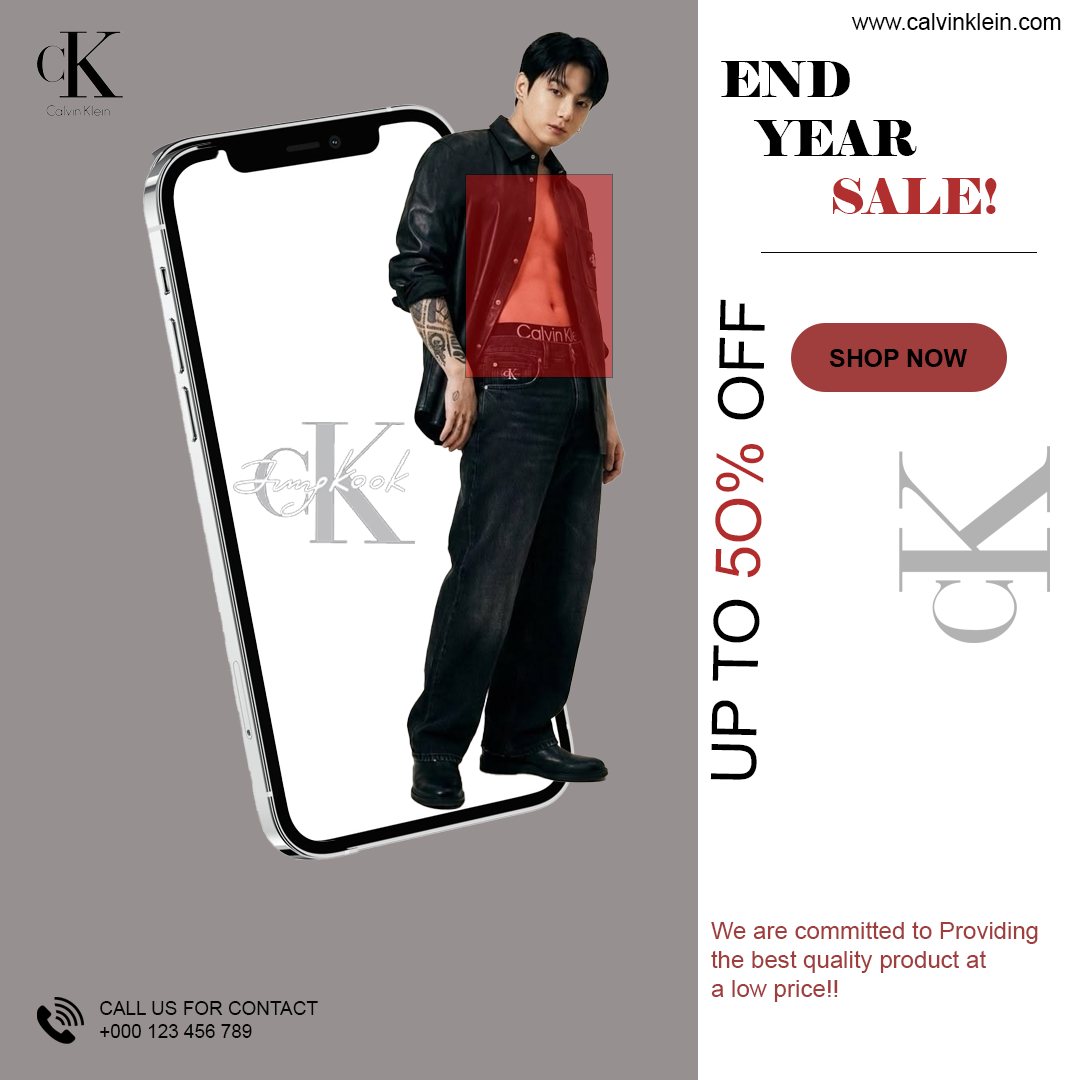
<style>
.page{position:relative;width:1080px;height:1080px;background:#ffffff}
.page>*{position:absolute;margin:0}
.t1{font:22.8px "ArialMT";color:#040404}
.t2{font:48.9px "Elephant-Regular";color:#000000}
.t3{font:48.9px "Elephant-Regular";color:#b22f30}
.t4{font:62.6px "ArialMT";color:#000000}
.t5{font:62.6px "ArialMT";color:#b32c2c}
.t6{font:24.8px "Arial-BoldMT";color:#000000}
.t7{font:24px "ArialMT";color:#a03d3d}
.t8{font:18.9px "ArialMT";color:#040404}
</style>
<div class="page">
<p class="t1" style="left:851px;top:13px;width:210px;height:17px">www.calvinklein.com</p>
<p class="t2" style="left:721px;top:61px;width:276px;height:153px">END<br>   YEAR <br><span class="t3">         SALE!</span></p>
<p class="t4" style="left:710px;top:299px;width:55px;height:481px;rotate:-89deg">UP TO <span class="t5">5O% </span>OFF</p>
<p class="t6" style="left:829px;top:349px;width:138px;height:18px">SHOP NOW</p>
<p class="t7" style="left:711px;top:921px;width:327px;height:81px">We are committed to Providing<br>the best quality product at <br>a low price!!</p>
<p class="t8" style="left:100px;top:1001px;width:218px;height:37px">CALL US FOR CONTACT<br>+000 123 456 789</p>
</div>
